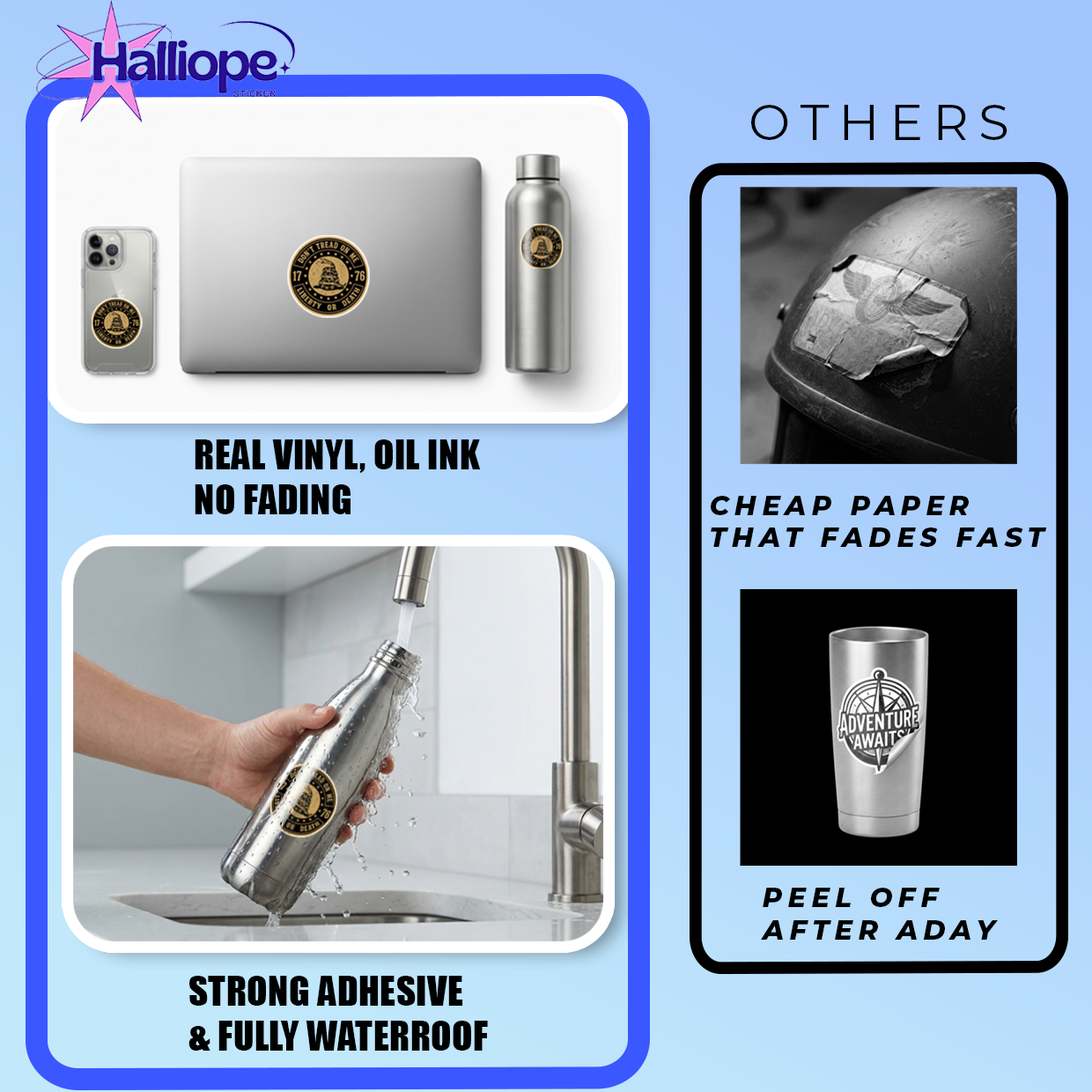
<style>
.page{position:relative;width:1092px;height:1092px}
.page>*{position:absolute;margin:0}
.t1{font:49.9px "Montserrat-Regular";letter-spacing:0.2em;color:#000000;text-transform:uppercase}
.t2{font:37.9px "Impact";letter-spacing:0.01em;color:#000000;text-transform:uppercase}
.t3{font:27px "Montserrat-ExtraBoldItalic";letter-spacing:0.2em;color:#000000;text-transform:uppercase}
</style>
<div class="page">
<p class="t1" style="left:751px;top:105px;width:256px;height:35px">OTHERS</p>
<p class="t2" style="left:195px;top:439px;width:286px;height:75px">real vinyl, oil ink<br>NO FADING</p>
<p class="t3" style="left:711px;top:496px;width:336px;height:51px">CHEAP PAPER<br>THAT FADES FAST</p>
<p class="t3" style="left:761px;top:888px;width:237px;height:52px">PEEL OFF<br>AFTER ADAY</p>
<p class="t2" style="left:188px;top:976px;width:300px;height:75px">STRONG ADHESIVE<br>&amp; FULLY WATERROOF</p>
</div>
